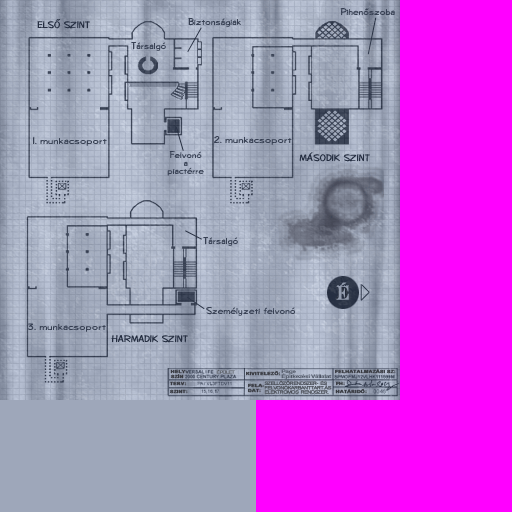
<style>
.page{position:relative;width:512px;height:512px;background:#ff00ff}
.page>*{position:absolute;margin:0}
.t1{font:9.6px "Diego-Regular";letter-spacing:0.03em;color:#374053;scale:1.05 1}
.t2{font:9.1px "Diego-Regular";letter-spacing:0.03em;color:#252e41;scale:1.19 1}
.t3{font:9.6px "Diego-Regular";letter-spacing:0.03em;color:#374053;scale:1.18 1}
.t4{font:9.1px/7.9px "Diego-Regular";letter-spacing:0.03em;color:#374053;scale:1.06 1}
.t5{font:19.5px "EngraversCE";color:#929bad;font-weight:bold;scale:0.81 1}
.t6{font:4.1px/5.7px "Arial-BoldMT";color:#383a41;font-weight:bold;scale:1.3 1}
.t7{font:4.3px "ArialMT";letter-spacing:-0.1em;color:#5a5e65;font-weight:bold;scale:1.2 1}
.t8{font:4.1px "Arial-BoldMT";color:#383a41;font-weight:bold;scale:1.3 1}
.t9{font:4.8px/4.5px "Arial-BoldMT";letter-spacing:-0.075em;color:#4f5665;scale:1.43 1}
.t10{font:4.5px/4.3px "ArialMT";letter-spacing:-0.1em;color:#4d515a;font-weight:bold;scale:1.2 1}
</style>
<div class="page">
<p class="t1" style="left:188px;top:17px;width:53px;height:10px">Biztonságiak</p>
<p class="t1" style="left:340px;top:8px;width:55px;height:8px">Pihenőszoba</p>
<p class="t2" style="left:37px;top:19px;width:53px;height:10px">ELSŐ SZINT</p>
<p class="t1" style="left:131px;top:42px;width:35px;height:9px">Társalgó</p>
<p class="t3" style="left:33px;top:136px;width:74px;height:10px">1. munkacsoport</p>
<p class="t3" style="left:214px;top:136px;width:78px;height:9px">2. munkacsoport</p>
<p class="t4" style="left:167px;top:151px;width:37px;height:25px;text-align:center">Felvonó<br>a<br>piactérre</p>
<p class="t2" style="left:299px;top:152px;width:71px;height:10px">MÁSODIK SZINT</p>
<p class="t1" style="left:203px;top:237px;width:35px;height:9px">Társalgó</p>
<p class="t5" style="left:336px;top:282px;width:13px;height:18px">É</p>
<p class="t1" style="left:206px;top:307px;width:89px;height:9px">Személyzeti felvonó</p>
<p class="t3" style="left:27px;top:323px;width:79px;height:9px">3. munkacsoport</p>
<p class="t2" style="left:111px;top:335px;width:77px;height:8px">HARMADIK SZINT</p>
<p class="t6" style="left:170px;top:369px;width:18px;height:10px">HELY-<br>SZÍN</p>
<p class="t7" style="left:216px;top:369px;width:19px;height:5px">ÉPÜLET</p>
<p class="t8" style="left:246px;top:371px;width:35px;height:5px">KIVITELEZŐ:</p>
<p class="t9" style="left:281px;top:369px;width:51px;height:10px">Page<br>Építkezési Vállalat</p>
<p class="t8" style="left:335px;top:369px;width:61px;height:5px">FELHATALMAZÁSI SZ:</p>
<p class="t8" style="left:169px;top:381px;width:18px;height:5px">TERV:</p>
<p class="t8" style="left:169px;top:389px;width:19px;height:5px">SZINT:</p>
<p class="t6" style="left:248px;top:383px;width:17px;height:10px">FELA-<br>DAT:</p>
<p class="t10" style="left:264px;top:380px;width:68px;height:14px">SZELLŐZŐRENDSZER-  ÉS<br>FELVONÓKARBANTTART.ÁS<br>ELEKTROMOS  RENDSZER.</p>
<p class="t8" style="left:335px;top:389px;width:32px;height:5px">HATÁRIDŐ:</p>
<p class="t8" style="left:336px;top:381px;width:9px;height:5px">FH:</p>
</div>
